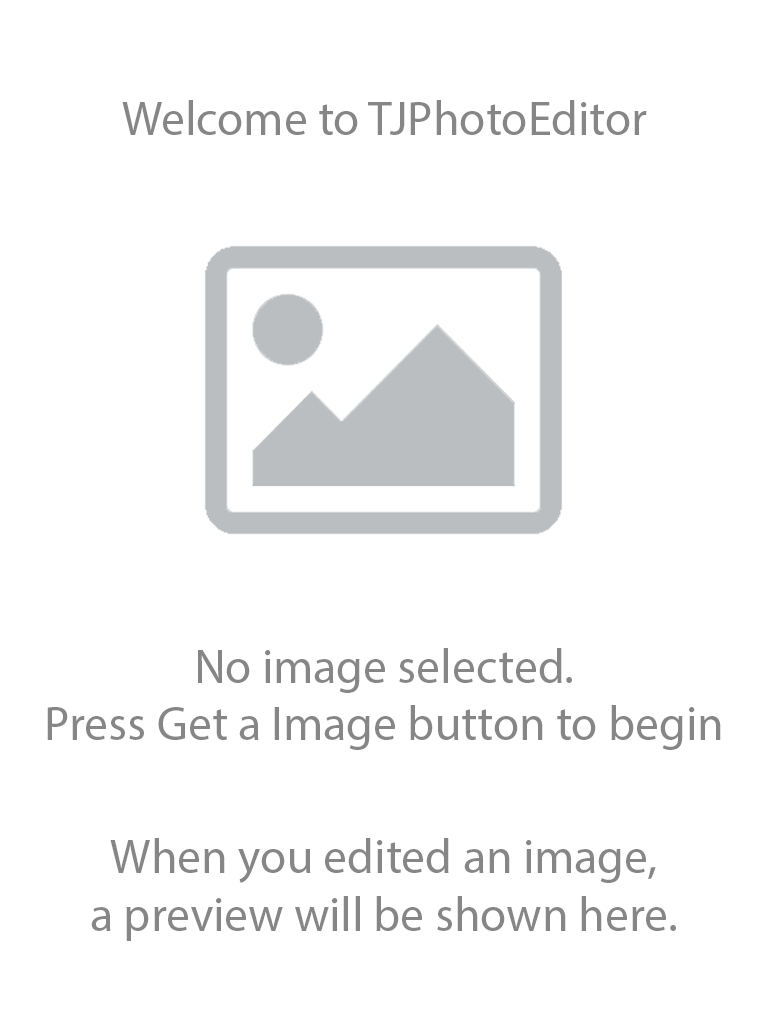
<style>
.page{position:relative;width:768px;height:1024px;background:#ffffff}
.page>*{position:absolute;margin:0}
.t1{font:48px "MyriadPro-Regular";color:#868686}
</style>
<div class="page">
<p class="t1" style="left:122px;top:100px;width:525px;height:35px">Welcome to TJPhotoEditor</p>
<p class="t1" style="left:47px;top:648px;width:674px;height:102px;text-align:center">No image selected.<br>Press Get a Image button to begin</p>
<p class="t1" style="left:91px;top:838px;width:585px;height:103px;text-align:center">When you edited an image,<br>a preview will be shown here.</p>
</div>
